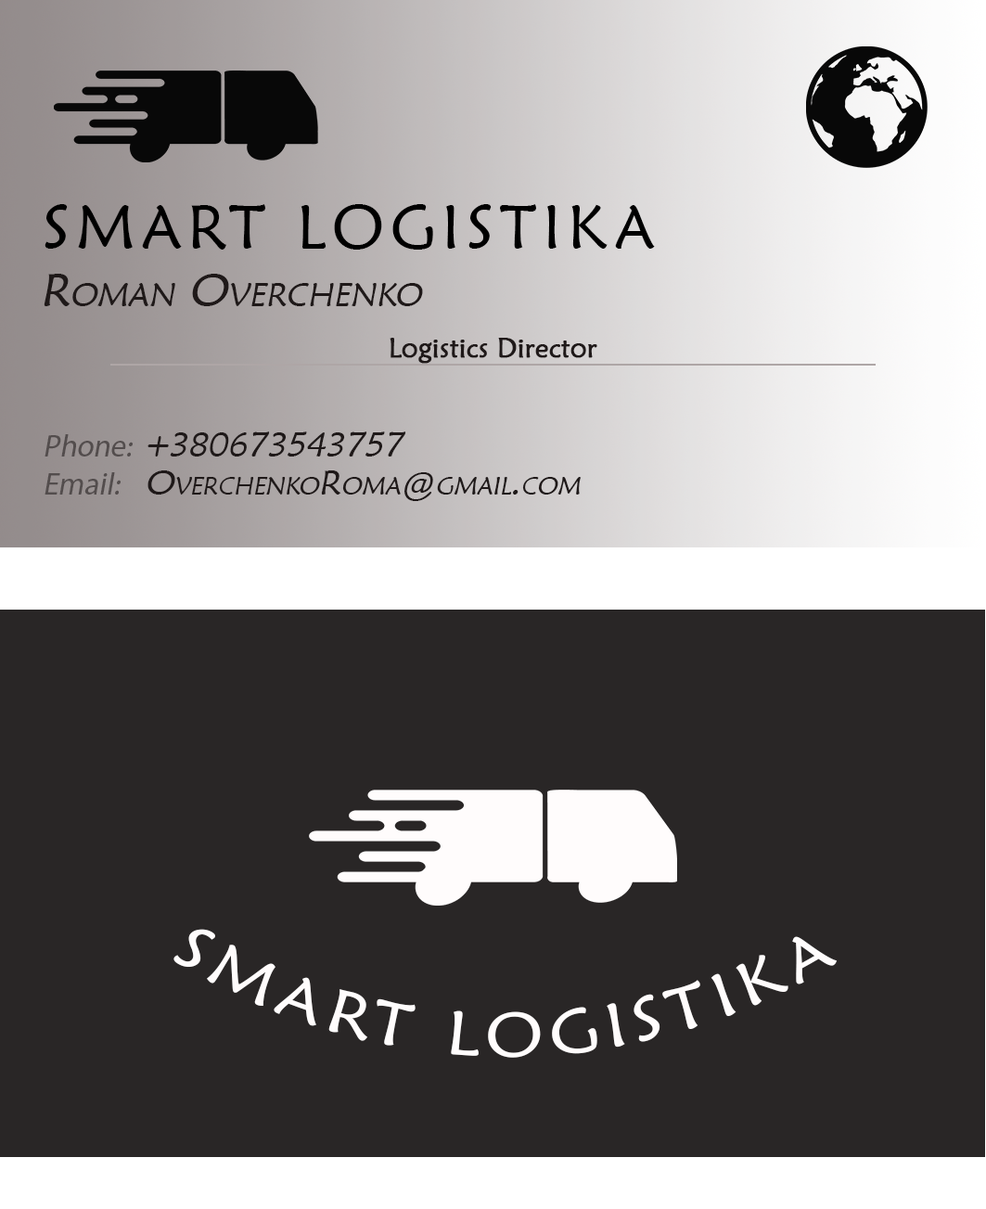
<style>
.page{position:relative;width:986px;height:1209px;background:#292626}
.page>*{position:absolute;margin:0}
.t1{font:61.9px "MaiandraGD-Regular";letter-spacing:0.1em;color:#000000;text-transform:uppercase}
.t2{font:46.4px "MaiandraGD-Regular";color:#1f1919;font-variant:small-caps;font-style:italic}
.t3{font:27.1px "MaiandraGD-Regular";color:#1f1919;font-weight:bold}
.t4{font:30.9px "MyriadPro-Regular";color:#534d4d;font-style:italic}
.t5{font:34.8px "MaiandraGD-Regular";color:#1f1919;font-variant:small-caps;font-style:italic}
.t6{font:61.9px/104.4px "MaiandraGD-Regular";letter-spacing:0.1em;color:#fffcfc;text-transform:uppercase}
</style>
<div class="page">
<p class="t1" style="left:45px;top:204px;width:610px;height:46px">Smart Logistika</p>
<p class="t2" style="left:44px;top:274px;width:379px;height:32px">Roman Overchenko</p>
<p class="t3" style="left:390px;top:338px;width:208px;height:26px">Logistics Director</p>
<p class="t4" style="left:45px;top:434px;width:88px;height:23px">Phone:</p>
<p class="t5" style="left:148px;top:431px;width:258px;height:26px">+380673543757</p>
<p class="t4" style="left:45px;top:472px;width:76px;height:23px">Email:</p>
<p class="t5" style="left:148px;top:470px;width:434px;height:31px">OverchenkoRoma@gmail.com</p>
<p class="t6" style="left:174px;top:929px;width:664px;height:129px">Smart Logistika</p>
</div>
